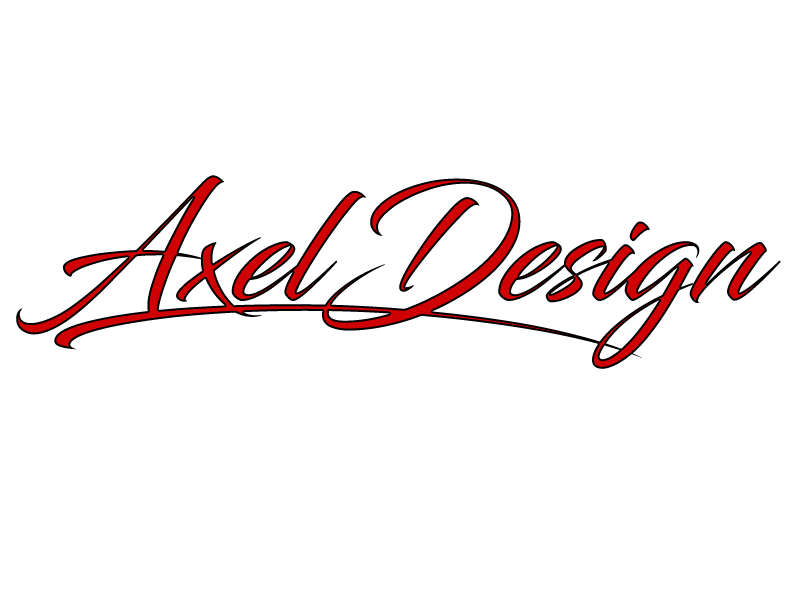
<style>
.page{position:relative;width:800px;height:600px;background:#ffffff}
.page>*{position:absolute;margin:0}
.t1{font:148px "Blacksword"}
</style>
<div class="page">
<p class="t1" style="left:16px;top:175px;width:765px;height:194px">Axel[Design</p>
</div>
